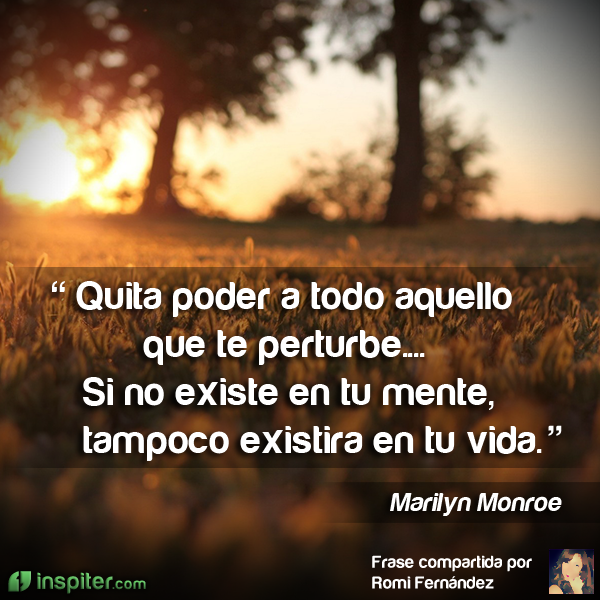
<style>
.page{position:relative;width:600px;height:600px}
.page>*{position:absolute;margin:0}
.t1{font:40.2px "Harabara";letter-spacing:0.03em;color:#ffffff}
.t2{font:26.8px "Harabara";letter-spacing:0.03em;color:#ffffff;font-style:italic}
.t3{font:17.9px "Harabara";letter-spacing:0.03em;color:#ffffff}
</style>
<div class="page">
<p class="t1" style="left:52px;top:281px;width:490px;height:180px">" Quita poder a todo aquello<br>         que te perturbe....<br>   Si no existe en tu mente,<br>   tampoco existira en tu vida.</p>
<p class="t1" style="left:548px;top:425px;width:14px;height:11px;rotate:-180deg">"</p>
<p class="t2" style="left:390px;top:493px;width:172px;height:23px">Marilyn Monroe</p>
<p class="t3" style="left:372px;top:555px;width:160px;height:17px">Frase compartida por</p>
<p class="t3" style="left:372px;top:576px;width:122px;height:13px">Romi Fernández</p>
</div>
